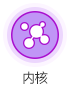
<style>
.page{position:relative;width:70px;height:94px;background:#ffffff}
.page>*{position:absolute;margin:0}
.t1{font:13px "MicrosoftYaHei";color:#323232}
</style>
<div class="page">
<p class="t1" style="left:23px;top:71px;width:25px;height:13px">内核</p>
</div>
